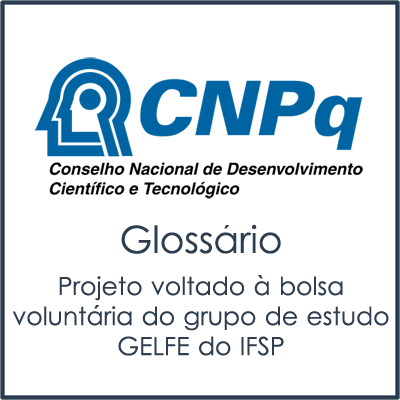
<style>
.page{position:relative;width:400px;height:400px;background:#ffffff}
.page>*{position:absolute;margin:0}
.t1{font:37.5px "LevenimMT";color:#2c3e50}
.t2{font:25px "ArialMT";color:#2c3e50}
.t3{font:25px "LevenimMT";color:#2c3e50}
</style>
<div class="page">
<p class="t1" style="left:121px;top:224px;width:160px;height:30px">Glossario</p>
<p class="t2" style="left:224px;top:225px;width:6px;height:4px">´</p>
<p class="t3" style="left:13px;top:276px;width:376px;height:80px;text-align:center">Projeto voltado a bolsa<br>voluntaria do grupo de estudo<br>GELFE do IFSP</p>
<p class="t2" style="left:257px;top:275px;width:6px;height:4px">`</p>
<p class="t2" style="left:94px;top:305px;width:6px;height:4px">´</p>
</div>
